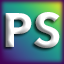
<style>
.page{position:relative;width:64px;height:64px}
.page>*{position:absolute;margin:0}
.t1{font:48px "AvenirNextLTPro-Bold"}
</style>
<div class="page">
<p class="t1" style="left:5px;top:12px;width:55px;height:36px">PS</p>
</div>
